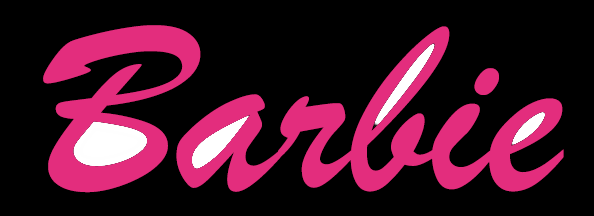
<style>
.page{position:relative;width:594px;height:216px;background:#000000}
.page>*{position:absolute;margin:0}
.t1{font:250px "BrushScriptMT";color:#e32d7d}
</style>
<div class="page">
<p class="t1" style="left:43px;top:25px;width:521px;height:168px">Barbie</p>
</div>
